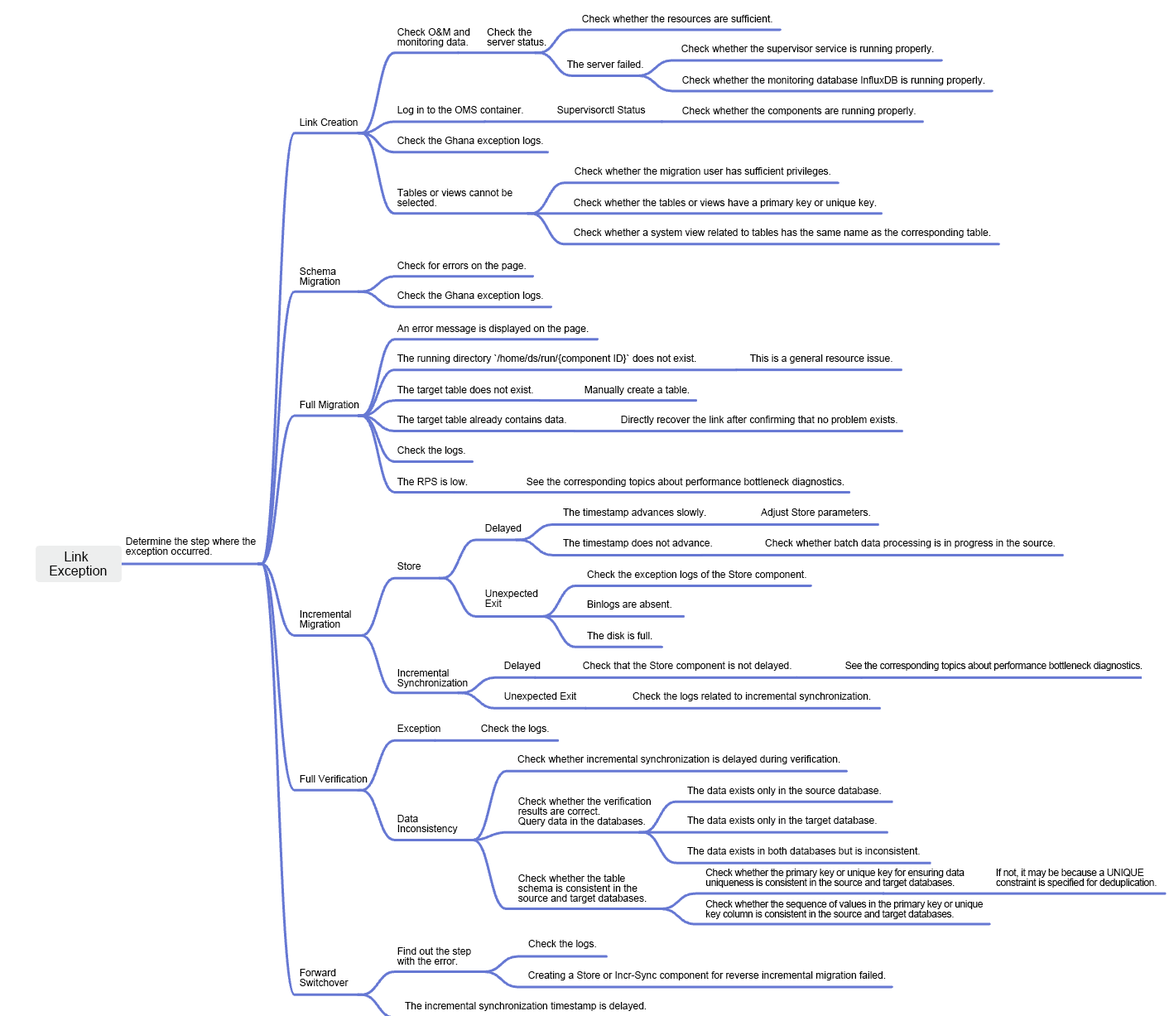
<style>
.page{position:relative;width:1174px;height:1016px;background:#ffffff}
.page>*{position:absolute;margin:0}
.t1{font:9.9px "ArialMT";color:#000000}
.t2{font:9.9px/9.9px "ArialMT";color:#000000}
.t3{font:13.2px/14.1px "ArialMT";color:#000000}
.t4{font:9.9px "ArialMT";letter-spacing:-0.03em;color:#000000}
.t5{font:9.9px/9.9px "ArialMT";letter-spacing:-0.03em;color:#000000}
</style>
<div class="page">
<p class="t1" style="left:582px;top:15px;width:190px;height:7px">Check whether the resources are sufficient.</p>
<p class="t2" style="left:397px;top:28px;width:73px;height:19px">Check O&amp;M and monitoring data.</p>
<p class="t2" style="left:487px;top:28px;width:59px;height:18px">Check the server status.</p>
<p class="t1" style="left:681px;top:45px;width:253px;height:9px">Check whether the supervisor service is running properly.</p>
<p class="t1" style="left:566px;top:60px;width:77px;height:8px">The server failed.</p>
<p class="t1" style="left:682px;top:76px;width:303px;height:9px">Check whether the monitoring database InfluxDB is running properly.</p>
<p class="t1" style="left:397px;top:106px;width:126px;height:9px">Log in to the OMS container.</p>
<p class="t1" style="left:557px;top:106px;width:89px;height:9px">Supervisorctl Status</p>
<p class="t1" style="left:682px;top:107px;width:234px;height:9px">Check whether the components are running properly.</p>
<p class="t1" style="left:300px;top:118px;width:58px;height:8px">Link Creation</p>
<p class="t1" style="left:397px;top:137px;width:146px;height:9px">Check the Ghana exception logs.</p>
<p class="t1" style="left:575px;top:167px;width:255px;height:9px">Check whether the migration user has sufficient privileges.</p>
<p class="t2" style="left:397px;top:189px;width:115px;height:17px">Tables or views cannot be selected.</p>
<p class="t1" style="left:574px;top:199px;width:303px;height:9px">Check whether the tables or views have a primary key or unique key.</p>
<p class="t1" style="left:574px;top:228px;width:417px;height:10px">Check whether a system view related to tables has the same name as the corresponding table.</p>
<p class="t2" style="left:300px;top:267px;width:40px;height:19px">Schema Migration</p>
<p class="t1" style="left:397px;top:262px;width:129px;height:9px">Check for errors on the page.</p>
<p class="t1" style="left:397px;top:291px;width:146px;height:10px">Check the Ghana exception logs.</p>
<p class="t1" style="left:397px;top:325px;width:192px;height:9px">An error message is displayed on the page.</p>
<p class="t1" style="left:397px;top:354px;width:299px;height:9px">The running directory `/home/ds/run/{component ID}` does not exist.</p>
<p class="t1" style="left:749px;top:354px;width:143px;height:9px">This is a general resource issue.</p>
<p class="t1" style="left:397px;top:386px;width:136px;height:9px">The target table does not exist.</p>
<p class="t1" style="left:584px;top:386px;width:106px;height:9px">Manually create a table.</p>
<p class="t1" style="left:300px;top:401px;width:59px;height:9px">Full Migration</p>
<p class="t1" style="left:397px;top:416px;width:169px;height:9px">The target table already contains data.</p>
<p class="t1" style="left:621px;top:416px;width:276px;height:9px">Directly recover the link after confirming that no problem exists.</p>
<p class="t1" style="left:397px;top:446px;width:68px;height:9px">Check the logs.</p>
<p class="t1" style="left:397px;top:478px;width:71px;height:7px">The RPS is low.</p>
<p class="t1" style="left:527px;top:478px;width:317px;height:9px">See the corresponding topics about performance bottleneck diagnostics.</p>
<p class="t1" style="left:563px;top:508px;width:143px;height:9px">The timestamp advances slowly.</p>
<p class="t1" style="left:761px;top:508px;width:109px;height:9px">Adjust Store parameters.</p>
<p class="t1" style="left:485px;top:524px;width:37px;height:9px">Delayed</p>
<p class="t2" style="left:126px;top:537px;width:130px;height:19px">Determine the step where the exception occurred.</p>
<p class="t1" style="left:563px;top:539px;width:149px;height:9px">The timestamp does not advance.</p>
<p class="t1" style="left:765px;top:539px;width:290px;height:9px">Check whether batch data processing is in progress in the source.</p>
<p class="t3" style="left:50px;top:551px;width:57px;height:27px;text-align:center">Link <br>Exception</p>
<p class="t1" style="left:397px;top:562px;width:24px;height:8px">Store</p>
<p class="t1" style="left:587px;top:570px;width:219px;height:10px">Check the exception logs of the Store component.</p>
<p class="t2" style="left:485px;top:589px;width:53px;height:18px">Unexpected Exit</p>
<p class="t1" style="left:587px;top:600px;width:84px;height:9px">Binlogs are absent.</p>
<p class="t2" style="left:300px;top:610px;width:51px;height:19px">Incremental Migration</p>
<p class="t1" style="left:587px;top:632px;width:65px;height:7px">The disk is full.</p>
<p class="t1" style="left:504px;top:661px;width:37px;height:10px">Delayed</p>
<p class="t1" style="left:583px;top:661px;width:208px;height:10px">Check that the Store component is not delayed.</p>
<p class="t4" style="left:845px;top:661px;width:297px;height:10px">See the corresponding topics about performance bottleneck diagnostics.</p>
<p class="t2" style="left:397px;top:669px;width:71px;height:19px">Incremental Synchronization</p>
<p class="t1" style="left:504px;top:692px;width:72px;height:9px">Unexpected Exit</p>
<p class="t1" style="left:632px;top:692px;width:239px;height:9px">Check the logs related to incremental synchronization.</p>
<p class="t1" style="left:397px;top:724px;width:43px;height:9px">Exception</p>
<p class="t1" style="left:481px;top:724px;width:68px;height:9px">Check the logs.</p>
<p class="t1" style="left:517px;top:755px;width:323px;height:9px">Check whether incremental synchronization is delayed during verification.</p>
<p class="t1" style="left:300px;top:775px;width:68px;height:7px">Full Verification</p>
<p class="t2" style="left:518px;top:797px;width:133px;height:29px">Check whether the verification results are correct.<br>Query data in the databases.</p>
<p class="t1" style="left:687px;top:786px;width:194px;height:10px">The data exists only in the source database.</p>
<p class="t2" style="left:397px;top:815px;width:61px;height:19px">Data Inconsistency</p>
<p class="t1" style="left:687px;top:816px;width:190px;height:9px">The data exists only in the target database.</p>
<p class="t1" style="left:687px;top:847px;width:233px;height:7px">The data exists in both databases but is inconsistent.</p>
<p class="t5" style="left:705px;top:868px;width:259px;height:19px">Check whether the primary key or unique key for ensuring data uniqueness is consistent in the source and target databases.</p>
<p class="t5" style="left:996px;top:868px;width:161px;height:19px">If not, it may be because a UNIQUE constraint is specified for deduplication.</p>
<p class="t2" style="left:518px;top:874px;width:129px;height:29px">Check whether the table schema is consistent in the source and target databases.</p>
<p class="t5" style="left:705px;top:900px;width:278px;height:19px">Check whether the sequence of values in the primary key or unique key column is consistent in the source and target databases.</p>
<p class="t1" style="left:528px;top:940px;width:68px;height:9px">Check the logs.</p>
<p class="t2" style="left:397px;top:947px;width:74px;height:17px">Find out the step with the error.</p>
<p class="t2" style="left:300px;top:969px;width:49px;height:17px">Forward Switchover</p>
<p class="t1" style="left:528px;top:971px;width:358px;height:9px">Creating a Store or Incr-Sync component for reverse incremental migration failed.</p>
<p class="t1" style="left:405px;top:1002px;width:242px;height:9px">The incremental synchronization timestamp is delayed.</p>
</div>
